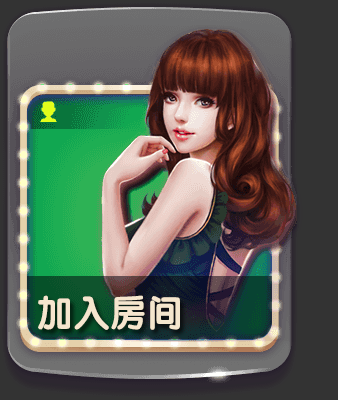
<style>
.page{position:relative;width:338px;height:400px}
.page>*{position:absolute;margin:0}
.t1{font:35.2px "STYuanti-TC-Bold";letter-spacing:0.04em;color:#f5e6ce}
</style>
<div class="page">
<p class="t1" style="left:38px;top:295px;width:142px;height:35px">加入房间</p>
</div>
